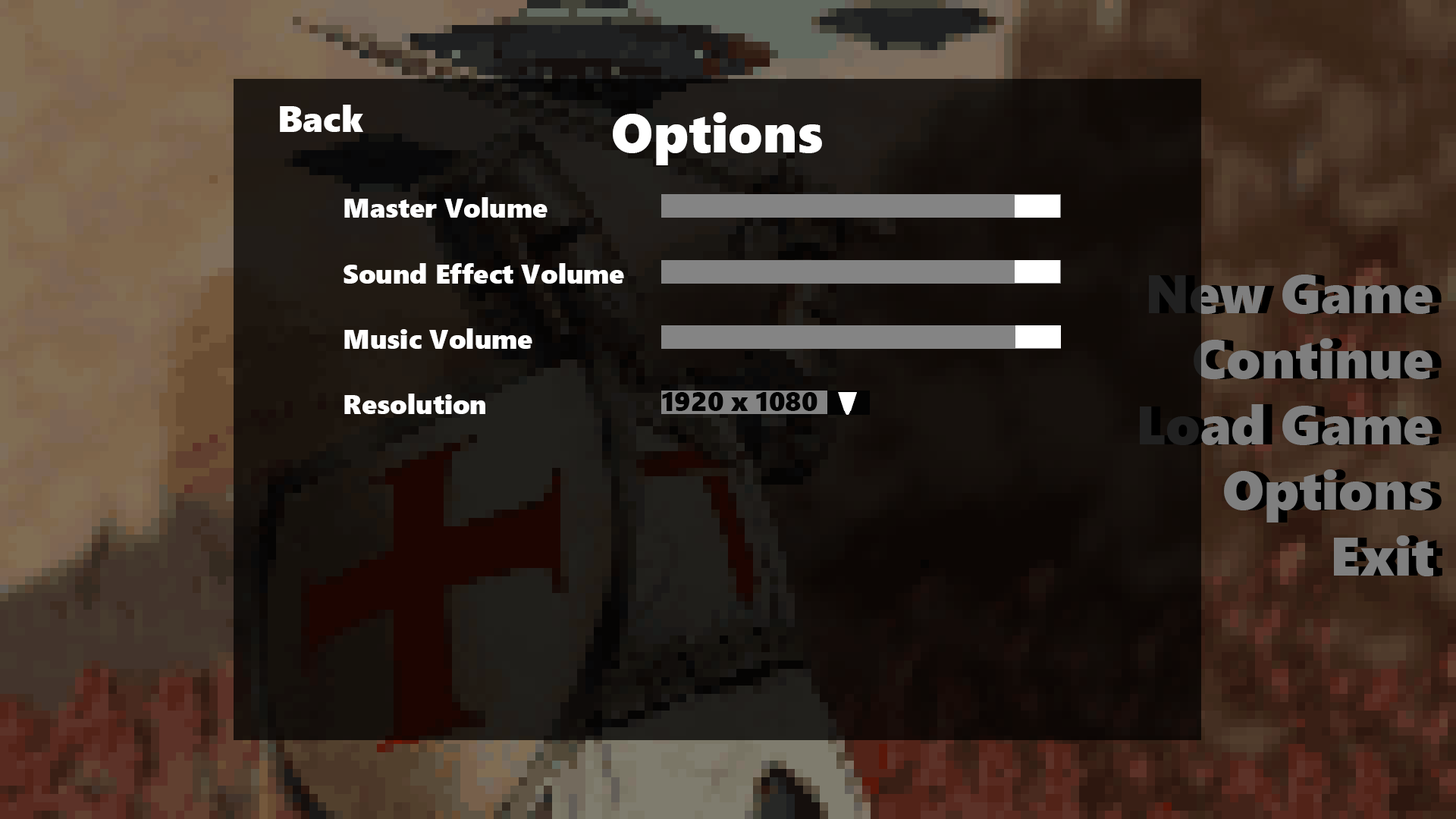
<style>
.page{position:relative;width:1456px;height:819px}
.page>*{position:absolute;margin:0}
.t1{font:36.4px "SegoeUIBlack";color:#ffffff}
.t2{font:27.3px "SegoeUIBlack";color:#ffffff}
.t3{font:54.6px "SegoeUIBlack";color:#ffffff}
.t4{font:54.6px "SegoeUIBlack";color:#7f7f7f}
.t5{font:27.3px "SegoeUIBlack";color:#030303}
</style>
<div class="page">
<p class="t1" style="left:280px;top:105px;width:83px;height:27px">Back</p>
<p class="t2" style="left:344px;top:112px;width:478px;height:302px;text-align:center"><span class="t3">Options<br></span><br>    Master Volume<br> <br>    Sound Effect Volume<br> <br>    Music Volume<br><br>    Resolution</p>
<p class="t4" style="left:1140px;top:275px;width:293px;height:301px;text-align:right">New Game<br>Continue<br>Load Game<br>Options<br>Exit</p>
<p class="t5" style="left:662px;top:392px;width:155px;height:19px">1920 x 1080</p>
<p class="t2" style="left:838px;top:392px;width:19px;height:19px">V</p>
</div>
